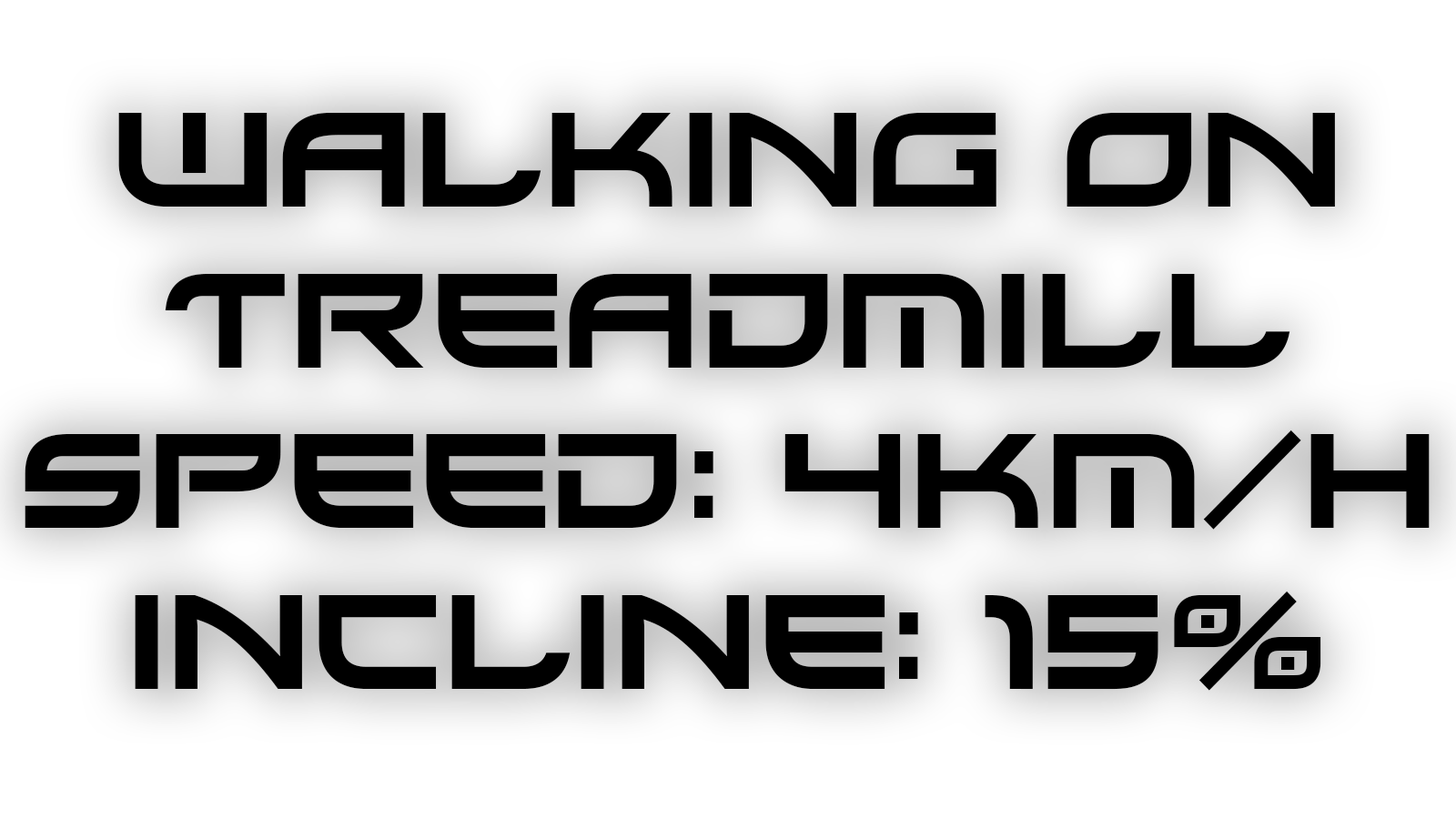
<style>
.page{position:relative;width:1456px;height:819px;background:#ffffff}
.page>*{position:absolute;margin:0}
.t1{font:134px "Xirod-Regular";color:#000000}
</style>
<div class="page">
<p class="t1" style="left:25px;top:113px;width:1405px;height:578px;text-align:center">Walking on<br>Treadmill<br>speed: 4km/h<br>incline: 15%</p>
</div>
